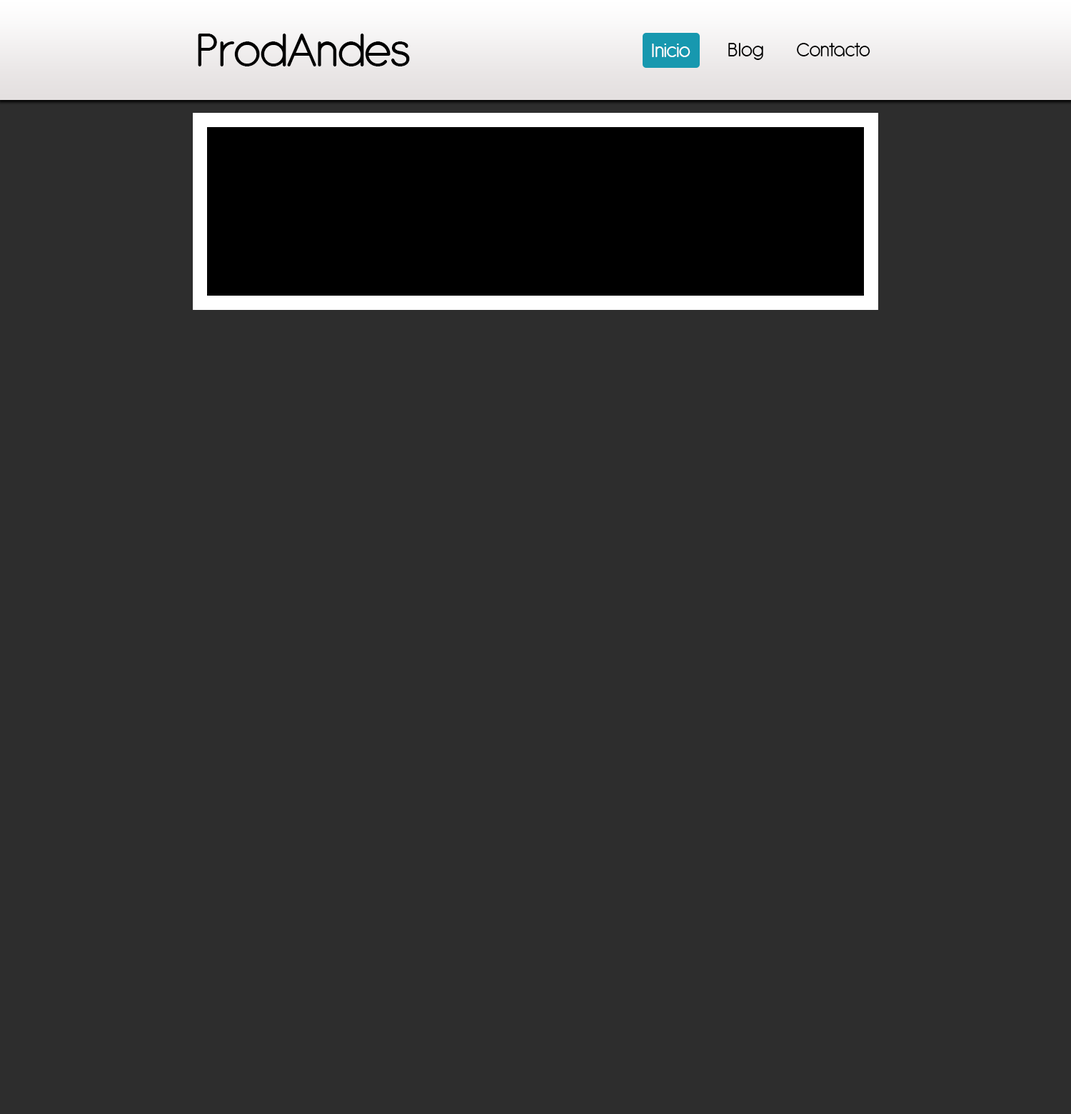
<style>
.page{position:relative;width:1071px;height:1114px;background:#2d2d2d}
.page>*{position:absolute;margin:0}
.t1{font:51.4px "Antipasto";color:#000000}
.t2{font:21.4px "Antipasto";color:#fefefe}
.t3{font:21.4px "Antipasto";color:#000000}
</style>
<div class="page">
<p class="t1" style="left:198px;top:34px;width:212px;height:32px">ProdAndes</p>
<p class="t2" style="left:652px;top:44px;width:38px;height:13px">Inicio</p>
<p class="t3" style="left:728px;top:43px;width:35px;height:17px">Blog</p>
<p class="t3" style="left:797px;top:43px;width:73px;height:13px">Contacto</p>
</div>
